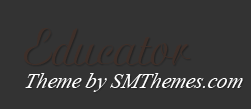
<style>
.page{position:relative;width:251px;height:109px;background:#333333}
.page>*{position:absolute;margin:0}
.t1{font:21px/24px "TimesNewRomanPS-ItalicMT";color:#ffffff;font-style:italic}
.t2{font:50px/24px "Ariston-Normal";color:#3e2f29}
</style>
<div class="page">
<p class="t1" style="left:24px;top:28px;width:219px;height:64px"><span class="t2">Educator<br></span>Theme by SMThemes.com</p>
</div>
